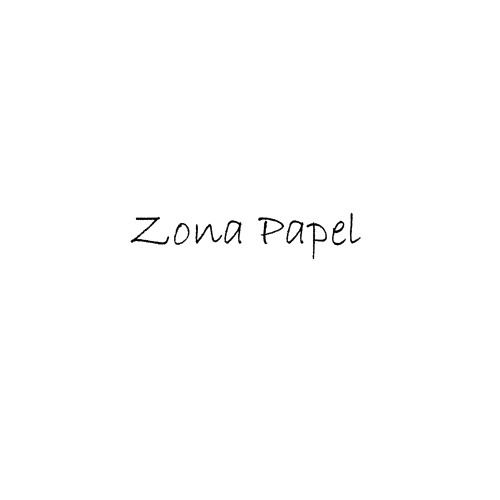
<style>
.page{position:relative;width:500px;height:500px;background:#ffffff}
.page>*{position:absolute;margin:0}
.t1{font:48px "BradleyHandITC";color:#000000}
</style>
<div class="page">
<p class="t1" style="left:130px;top:212px;width:231px;height:48px">Zona Papel</p>
</div>
